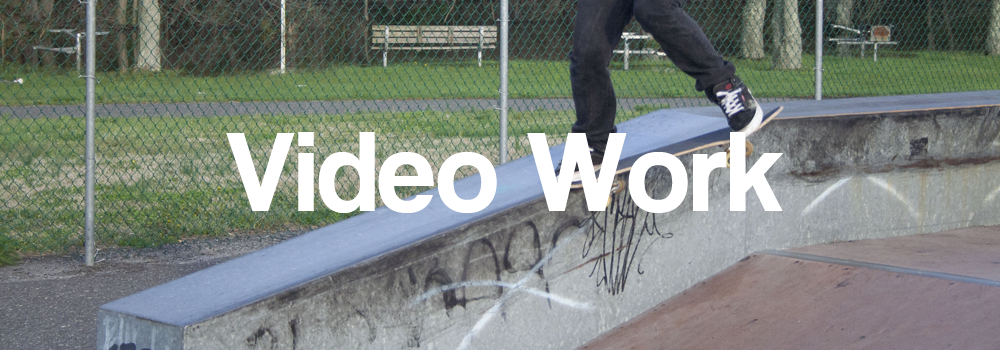
<style>
.page{position:relative;width:1000px;height:350px}
.page>*{position:absolute;margin:0}
.t1{font:117.3px "CoolveticaRg-Regular";color:#ffffff}
</style>
<div class="page">
<p class="t1" style="left:226px;top:132px;width:557px;height:81px">Video Work</p>
</div>
